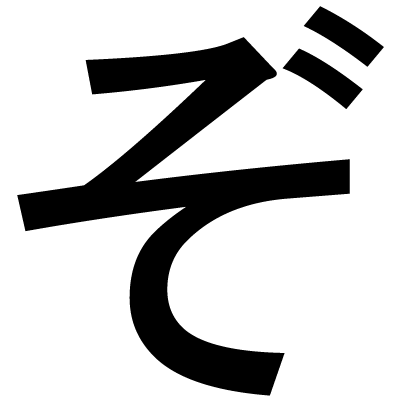
<style>
.page{position:relative;width:400px;height:400px;background:#ffffff}
.page>*{position:absolute;margin:0}
.t1{font:416.7px "MS-PGothic";color:#000000}
</style>
<div class="page">
<p class="t1" style="left:17px;top:6px;width:367px;height:390px">ぞ</p>
</div>
